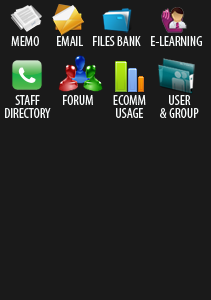
<style>
.page{position:relative;width:211px;height:300px;background:#1a1a1a}
.page>*{position:absolute;margin:0}
.t1{font:14px "MyriadPro-Cond";color:#f7fafa}
.t2{font:14px/12.9px "MyriadPro-Cond";color:#f7fafa}
</style>
<div class="page">
<p class="t1" style="left:11px;top:36px;width:28px;height:10px">MEMO</p>
<p class="t1" style="left:57px;top:36px;width:26px;height:10px">EMAIL</p>
<p class="t1" style="left:93px;top:36px;width:48px;height:10px">FILES BANK</p>
<p class="t1" style="left:151px;top:36px;width:51px;height:10px">E-LEARNING</p>
<p class="t2" style="left:5px;top:95px;width:46px;height:23px;text-align:center">STAFF<br>DIRECTORY</p>
<p class="t1" style="left:63px;top:95px;width:30px;height:10px">FORUM</p>
<p class="t2" style="left:113px;top:95px;width:33px;height:23px;text-align:center">ECOMM<br>USAGE</p>
<p class="t2" style="left:160px;top:95px;width:39px;height:23px;text-align:center">USER<br>&amp; GROUP</p>
</div>
